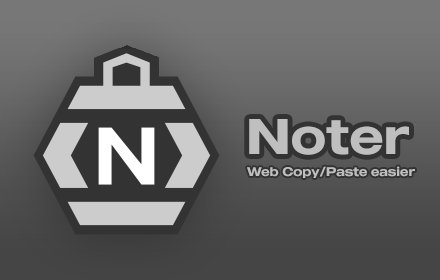
<style>
.page{position:relative;width:440px;height:280px}
.page>*{position:absolute;margin:0}
.t1{font:50px "MADEOuterSans-Medium";color:#bfbfbf}
.t2{font:12.5px "MADEOuterSans-Medium";color:#bfbfbf}
</style>
<div class="page">
<p class="t1" style="left:249px;top:119px;width:160px;height:36px">Noter</p>
<p class="t2" style="left:247px;top:166px;width:168px;height:12px">Web Copy/Paste easier</p>
</div>
